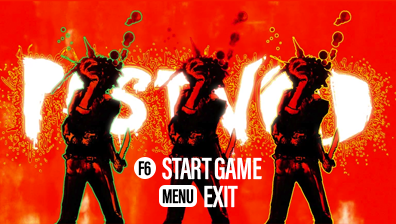
<style>
.page{position:relative;width:396px;height:224px}
.page>*{position:absolute;margin:0}
.t1{font:20.3px "AcuminConcept-ExtraCondensedSemibold";letter-spacing:-0.02em;color:#000000}
.t2{font:31.5px "AcuminConcept-ExtraCondensedSemibold";letter-spacing:-0.02em;color:#ffffff}
</style>
<div class="page">
<p class="t1" style="left:138px;top:161px;width:13px;height:15px">F6</p>
<p class="t2" style="left:162px;top:157px;width:100px;height:23px">START GAME</p>
<p class="t2" style="left:204px;top:185px;width:34px;height:23px">EXIT</p>
<p class="t1" style="left:162px;top:189px;width:32px;height:15px">MENU</p>
</div>
